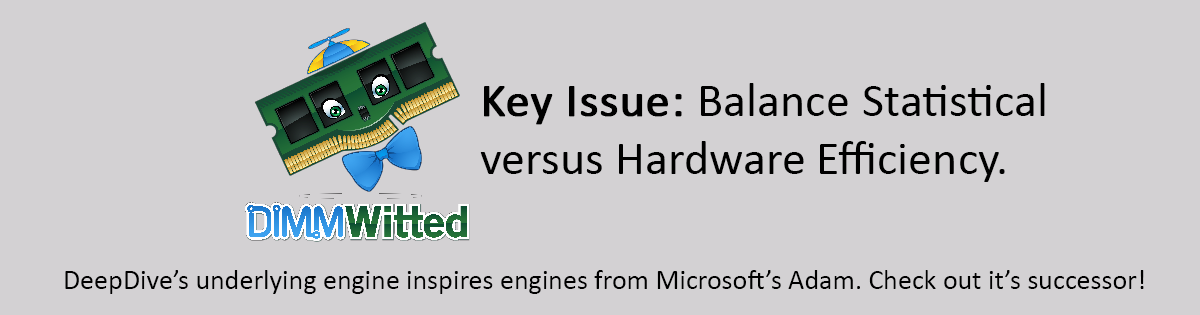
<style>
.page{position:relative;width:1200px;height:315px;background:#d3d1d3}
.page>*{position:absolute;margin:0}
.t1{font:48px "Calibri";color:#000000}
.t2{font:48px "Calibri";color:#000000;font-weight:bold}
.t3{font:28px "Calibri";color:#000000}
</style>
<div class="page">
<p class="t1" style="left:480px;top:83px;width:565px;height:99px"><span class="t2">Key Issue: </span>Balance Statistical <br>versus Hardware Efficiency.</p>
<p class="t3" style="left:65px;top:270px;width:1079px;height:24px">DeepDive’s underlying engine inspires engines from Microsoft’s Adam. Check out it’s successor!</p>
</div>
